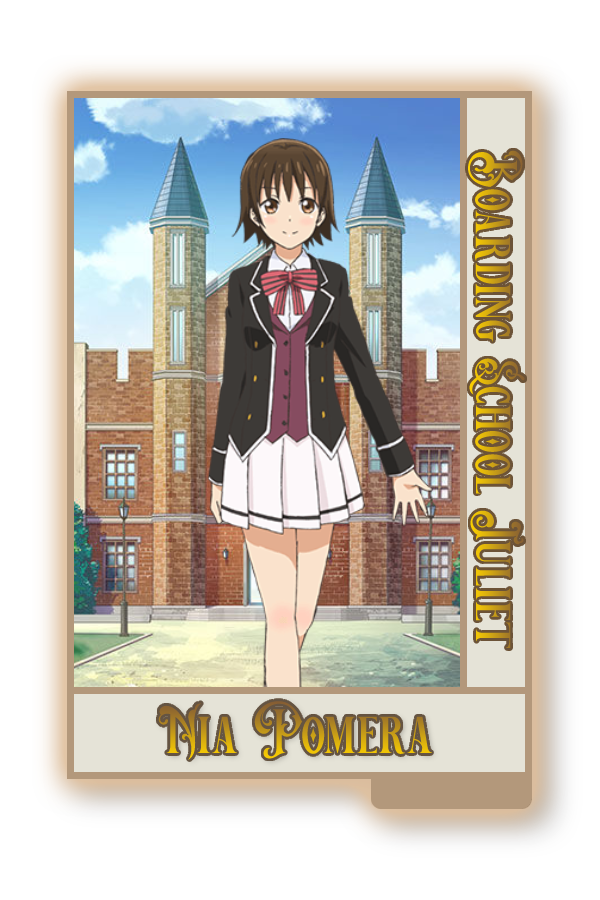
<style>
.page{position:relative;width:600px;height:900px;background:#ffffff}
.page>*{position:absolute;margin:0}
.t1{font:58.9px "VictorianDecadeDemoVersion"}
.t2{font:62.3px "VictorianDecadeDemoVersion"}
</style>
<div class="page">
<p class="t1" style="left:468px;top:150px;width:57px;height:498px;rotate:90deg">Boarding School Juliet</p>
<p class="t2" style="left:157px;top:701px;width:276px;height:60px">Nia Pomera</p>
</div>
